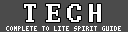
<style>
.page{position:relative;width:128px;height:32px;background:#4b4b4b}
.page>*{position:absolute;margin:0}
.t1{font:29.3px "Terminal";letter-spacing:0.2em;color:#ffffff}
.t2{font:6px "Terminal";color:#ffffff}
</style>
<div class="page">
<p class="t1" style="left:24px;top:4px;width:77px;height:18px">TECH</p>
<p class="t2" style="left:6px;top:26px;width:115px;height:5px">COMPLETE TO LITE SPIRIT GUIDE</p>
</div>
